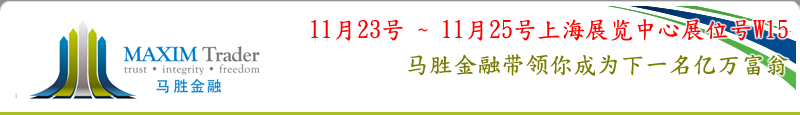
<style>
.page{position:relative;width:800px;height:115px;background:#ffffff}
.page>*{position:absolute;margin:0}
.t1{font:24px "DFKaiShu-SB-Estd-BF";color:#ff0000}
.t2{font:24px "DFKaiShu-SB-Estd-BF";color:#777c00}
</style>
<div class="page">
<p class="t1" style="left:311px;top:19px;width:477px;height:22px">11月23号 ~ 11月25号上海展览中心展位号W15</p>
<p class="t2" style="left:408px;top:54px;width:380px;height:22px">马胜金融带领你成为下一名亿万富翁</p>
</div>
